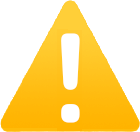
<style>
.page{position:relative;width:140px;height:132px;background:#ffffff}
.page>*{position:absolute;margin:0}
.t1{font:110px "OCRAStd";color:#ffffff;font-weight:bold}
</style>
<div class="page">
<p class="t1" style="left:61px;top:33px;width:19px;height:90px">!</p>
</div>
